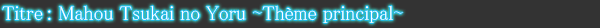
<style>
.page{position:relative;width:600px;height:28px;background:#333333}
.page>*{position:absolute;margin:0}
.t1{font:20px "MS-PMincho";color:#ffffff}
.t2{font:10px "MS-PMincho";color:#ffffff;scale:2 1}
</style>
<div class="page">
<p class="t1" style="left:2px;top:5px;width:401px;height:18px">Titre : Mahou Tsukai no Yoru <span class="t2">~</span>Thème principal<span class="t2">~</span></p>
</div>
